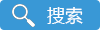
<style>
.page{position:relative;width:100px;height:30px;background:#3998d6}
.page>*{position:absolute;margin:0}
.t1{font:18px "MicrosoftYaHei";color:#ffffff}
</style>
<div class="page">
<p class="t1" style="left:47px;top:7px;width:36px;height:18px">搜索</p>
</div>
